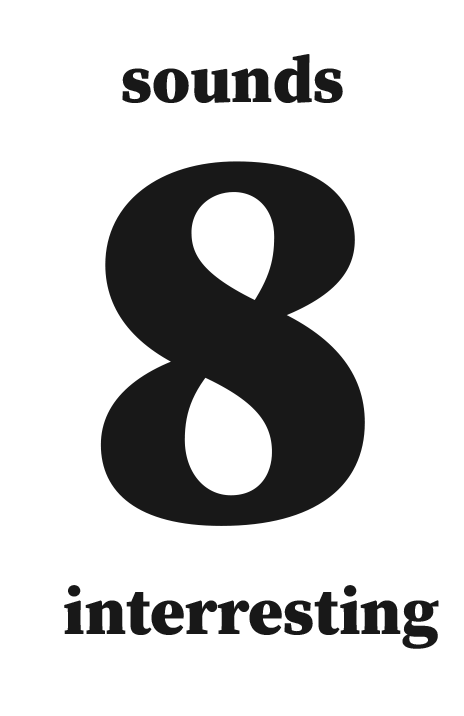
<style>
.page{position:relative;width:464px;height:716px;background:#ffffff}
.page>*{position:absolute;margin:0}
.t1{font:66.7px "SourceSerifRoman-Black";color:#181818}
.t2{font:555.6px "SourceSerifRoman-Black";color:#181818}
</style>
<div class="page">
<p class="t1" style="left:122px;top:54px;width:221px;height:49px">sounds</p>
<p class="t2" style="left:100px;top:161px;width:265px;height:365px">8</p>
<p class="t1" style="left:64px;top:585px;width:375px;height:64px">interresting</p>
</div>
